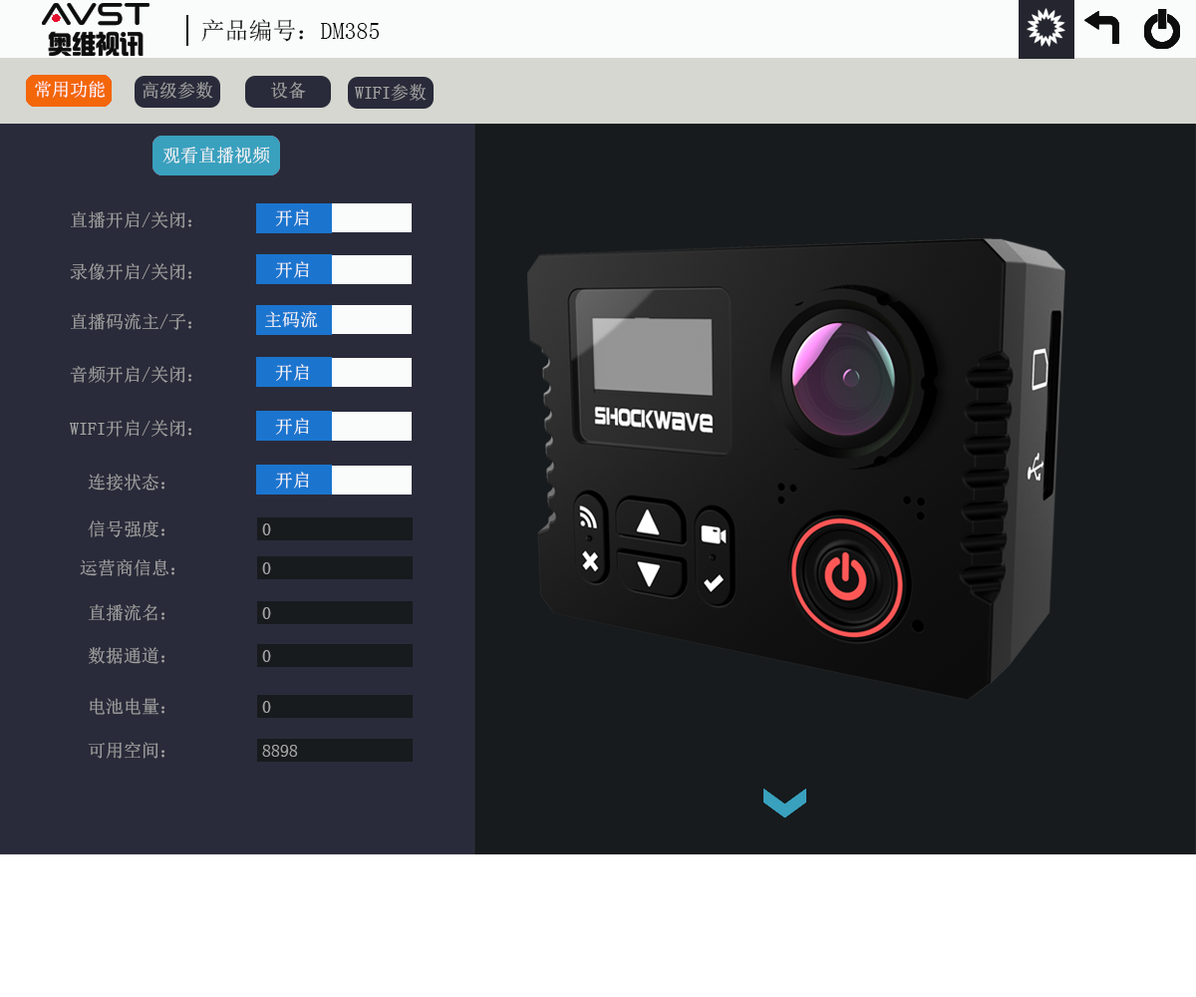
<style>
.page{position:relative;width:1196px;height:997px;background:#171b1d}
.page>*{position:absolute;margin:0}
.t1{font:23.9px "SimSun";color:#0d0d0d}
.t2{font:17.9px "SimSun";color:#fffefe}
.t3{font:17.9px "SimSun";color:#a3a3a3}
.t4{font:17.9px "SimSun";color:#fcfafa}
.t5{font:17.9px "SimSun";color:#fafbfb}
</style>
<div class="page">
<p class="t1" style="left:201px;top:19px;width:179px;height:23px">产品编号：DM385</p>
<p class="t2" style="left:35px;top:81px;width:71px;height:17px">常用功能</p>
<p class="t3" style="left:143px;top:82px;width:70px;height:17px">高级参数</p>
<p class="t3" style="left:271px;top:82px;width:35px;height:17px">设备</p>
<p class="t3" style="left:355px;top:84px;width:72px;height:17px">WIFI参数</p>
<p class="t4" style="left:162px;top:147px;width:108px;height:16px">观看直播视频</p>
<p class="t5" style="left:275px;top:209px;width:34px;height:17px">开启</p>
<p class="t3" style="left:71px;top:211px;width:120px;height:17px">直播开启/关闭：</p>
<p class="t3" style="left:70px;top:263px;width:121px;height:17px">录像开启/关闭：</p>
<p class="t5" style="left:275px;top:261px;width:34px;height:17px">开启</p>
<p class="t3" style="left:71px;top:313px;width:120px;height:17px">直播码流主/子：</p>
<p class="t5" style="left:265px;top:311px;width:53px;height:17px">主码流</p>
<p class="t3" style="left:70px;top:366px;width:121px;height:17px">音频开启/关闭：</p>
<p class="t5" style="left:275px;top:364px;width:34px;height:17px">开启</p>
<p class="t3" style="left:70px;top:420px;width:121px;height:17px">WIFI开启/关闭：</p>
<p class="t5" style="left:275px;top:418px;width:34px;height:17px">开启</p>
<p class="t3" style="left:88px;top:473px;width:76px;height:17px">连接状态：</p>
<p class="t5" style="left:275px;top:472px;width:34px;height:16px">开启</p>
<p class="t3" style="left:88px;top:520px;width:76px;height:17px">信号强度：</p>
<p class="t3" style="left:262px;top:523px;width:9px;height:12px">0</p>
<p class="t3" style="left:80px;top:559px;width:94px;height:17px">运营商信息：</p>
<p class="t3" style="left:262px;top:562px;width:9px;height:12px">0</p>
<p class="t3" style="left:89px;top:604px;width:75px;height:17px">直播流名：</p>
<p class="t3" style="left:262px;top:607px;width:9px;height:12px">0</p>
<p class="t3" style="left:89px;top:647px;width:75px;height:17px">数据通道：</p>
<p class="t3" style="left:262px;top:650px;width:9px;height:12px">0</p>
<p class="t3" style="left:90px;top:698px;width:74px;height:17px">电池电量：</p>
<p class="t3" style="left:262px;top:701px;width:9px;height:12px">0</p>
<p class="t3" style="left:89px;top:742px;width:75px;height:17px">可用空间：</p>
<p class="t3" style="left:262px;top:745px;width:36px;height:12px">8898</p>
</div>
